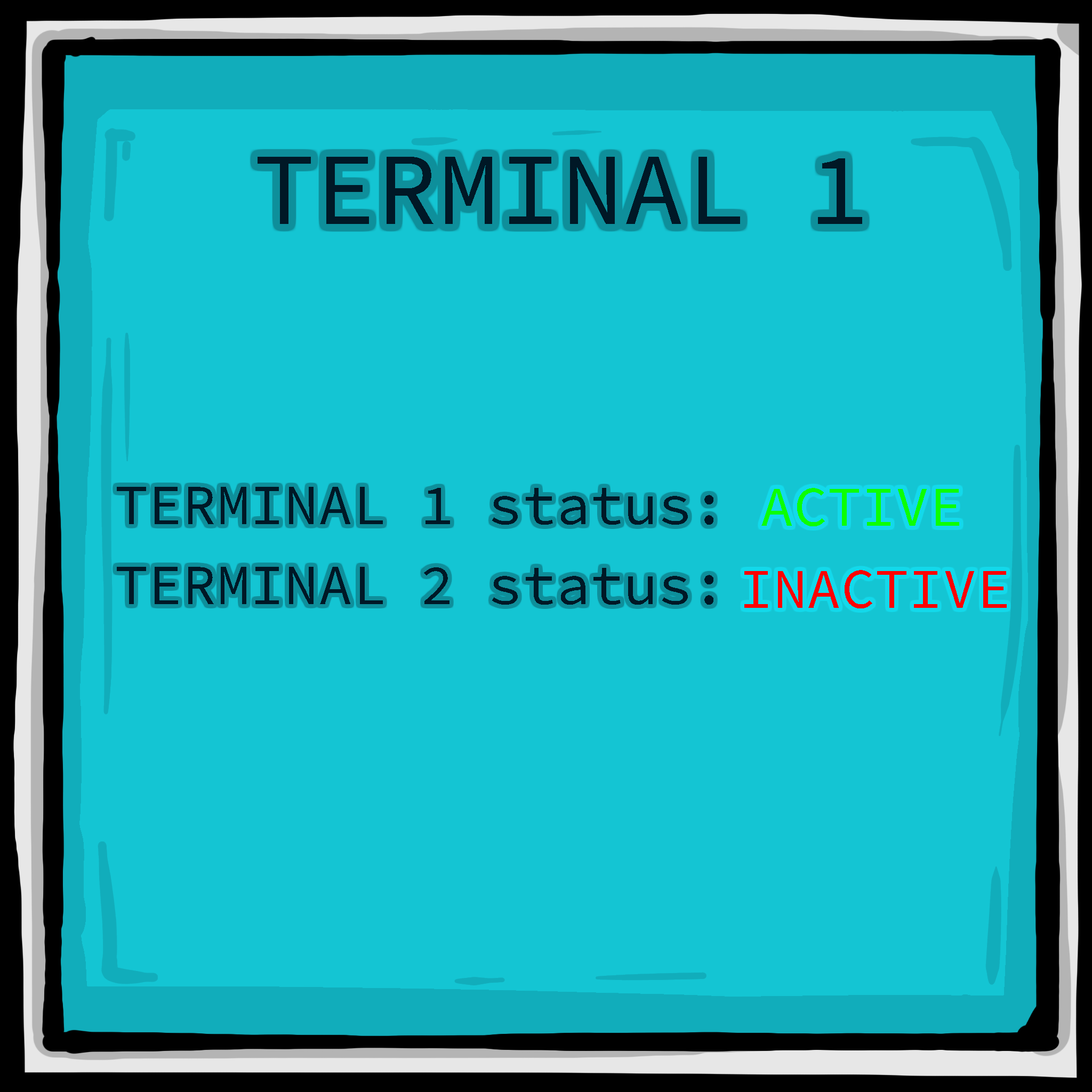
<style>
.page{position:relative;width:1092px;height:1092px;background:#14c5d3}
.page>*{position:absolute;margin:0}
.t1{font:102.7px "SourceCodePro-Regular";color:#001826;font-weight:bold}
.t2{font:56.5px "SourceCodePro-Regular";color:#001826;font-weight:bold}
.t3{font:56.4px "SourceCodePro-Regular";color:#0cff00;font-weight:bold}
.t4{font:56.4px "SourceCodePro-Regular";color:#ff0000;font-weight:bold}
</style>
<div class="page">
<p class="t1" style="left:258px;top:157px;width:604px;height:67px">TERMINAL 1</p>
<p class="t2" style="left:117px;top:487px;width:596px;height:38px">TERMINAL 1 status:</p>
<p class="t3" style="left:761px;top:488px;width:198px;height:38px">ACTIVE</p>
<p class="t2" style="left:117px;top:567px;width:596px;height:38px">TERMINAL 2 status:</p>
<p class="t4" style="left:744px;top:570px;width:263px;height:38px">INACTIVE</p>
</div>
